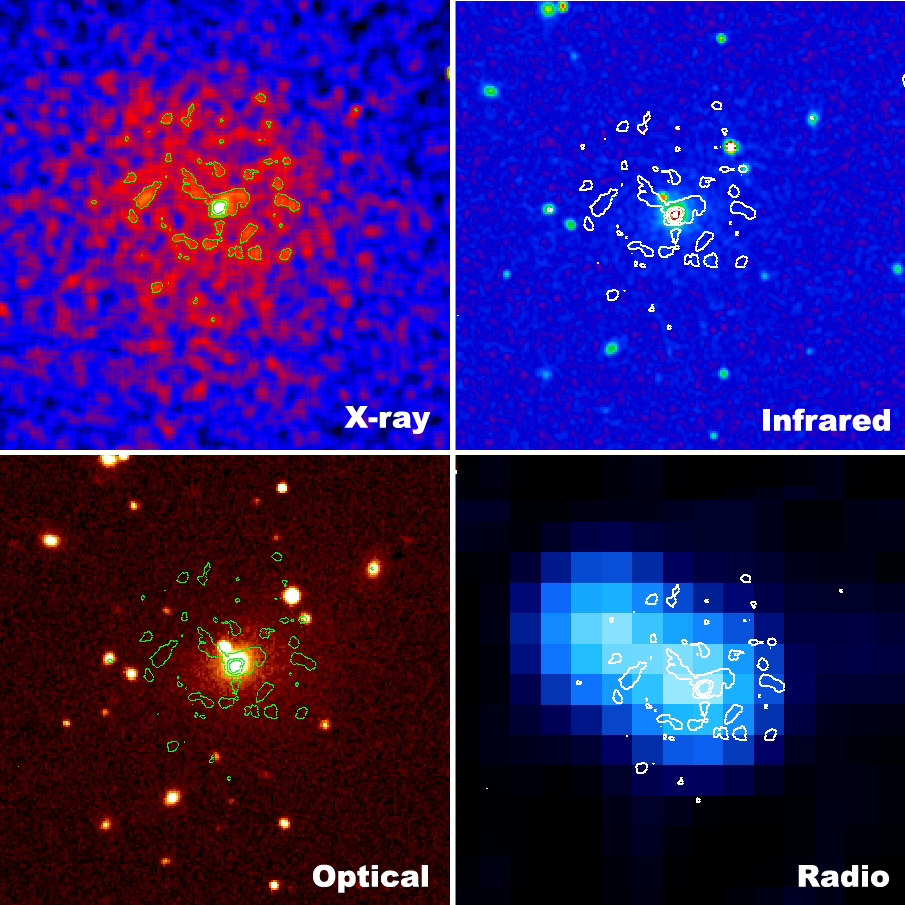
<style>
.page{position:relative;width:905px;height:905px}
.page>*{position:absolute;margin:0}
.t1{font:30px "Arial-Black";color:#ffffff}
</style>
<div class="page">
<p class="t1" style="left:344px;top:406px;width:87px;height:28px">X-ray</p>
<p class="t1" style="left:763px;top:408px;width:127px;height:23px">Infrared</p>
<p class="t1" style="left:313px;top:864px;width:115px;height:29px">Optical</p>
<p class="t1" style="left:798px;top:865px;width:91px;height:22px">Radio</p>
</div>
